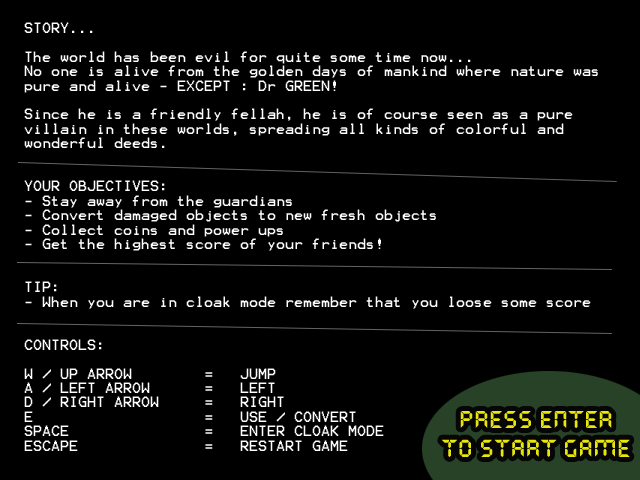
<style>
.page{position:relative;width:640px;height:480px;background:#000000}
.page>*{position:absolute;margin:0}
.t1{font:12px "Terminal";color:#ffffff}
.t2{font:24px "QuartzMS";color:#e9e60b}
</style>
<div class="page">
<p class="t1" style="left:24px;top:22px;width:574px;height:429px">STORY...<br><br>The world has been evil for quite some time now...<br>No one is alive from the golden days of mankind where nature was<br>pure and alive - EXCEPT : Dr GREEN!<br><br>Since he is a friendly fellah, he is of course seen as a pure<br>villain in these worlds, spreading all kinds of colorful and<br>wonderful deeds.<br><br><br>YOUR OBJECTIVES:<br>- Stay away from the guardians<br>- Convert damaged objects to new fresh objects<br>- Collect coins and power ups<br>- Get the highest score of your friends!<br><br><br>TIP:<br>- When you are in cloak mode remember that you loose some score<br><br><br>CONTROLS:<br><br>W / UP ARROW     =   JUMP<br>A / LEFT ARROW   =   LEFT<br>D / RIGHT ARROW  =   RIGHT<br>E     = USE / CONVERT<br>SPACE    =  ENTER CLOAK MODE<br>ESCAPE    = RESTART GAME</p>
<p class="t2" style="left:442px;top:411px;width:188px;height:46px;text-align:center">PRESS ENTER<br>TO START GAME</p>
</div>
